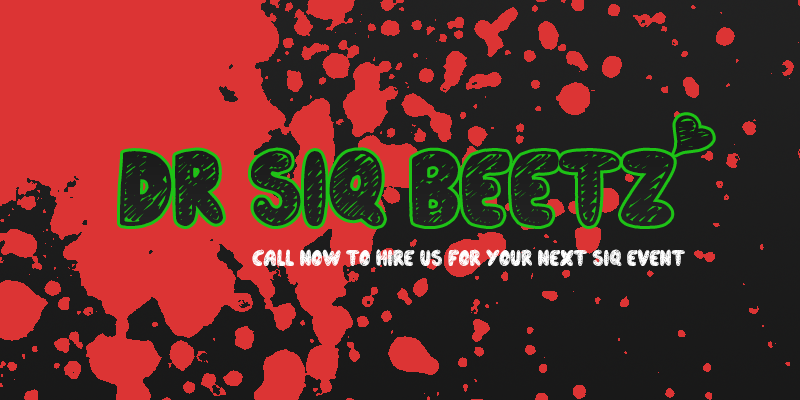
<style>
.page{position:relative;width:800px;height:400px;background:#dc3434}
.page>*{position:absolute;margin:0}
.t1{font:107px "CallMe,Maybe?";color:#1f1f1f}
.t2{font:23px "CallMe,Maybe?";color:#ffffff}
</style>
<div class="page">
<p class="t1" style="left:120px;top:115px;width:593px;height:112px">Dr Siq Beetz’</p>
<p class="t2" style="left:252px;top:249px;width:433px;height:17px">Call now to hire us for your next siq event</p>
</div>
